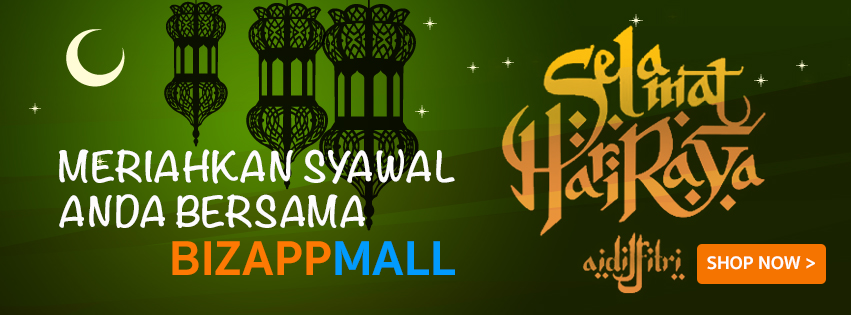
<style>
.page{position:relative;width:851px;height:315px}
.page>*{position:absolute;margin:0}
.t1{font:37.5px "Noteworthy-Bold";color:#fdfcfc}
.t2{font:50px "SukhumvitSet-Bold";color:#fd7903}
.t3{font:50px "SukhumvitSet-Bold";color:#019bfd}
.t4{font:18.8px "SukhumvitSet-Bold";color:#fefdfc}
</style>
<div class="page">
<p class="t1" style="left:59px;top:149px;width:396px;height:79px">MERIAHKAN SYAWAL ANDA BERSAMA</p>
<p class="t2" style="left:172px;top:241px;width:283px;height:34px">BIZAPP<span class="t3">MALL</span></p>
<p class="t4" style="left:707px;top:256px;width:108px;height:14px">SHOP NOW &gt;</p>
</div>
